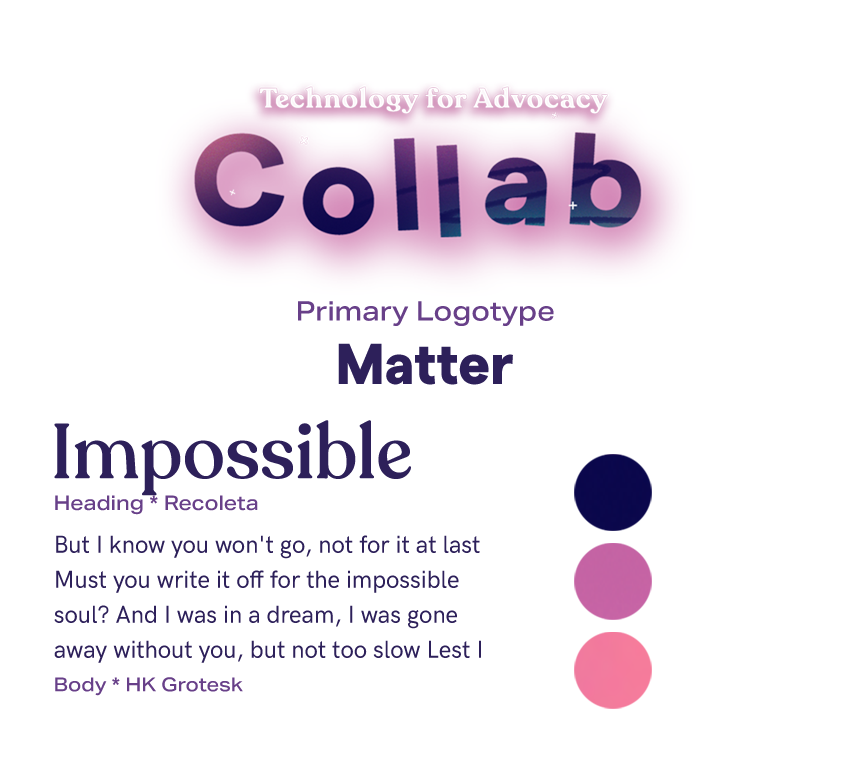
<style>
.page{position:relative;width:850px;height:768px;background:#ffffff}
.page>*{position:absolute;margin:0}
.t1{font:27.1px "AktivGroteskEx-Medium";color:#684089;scale:0.96 1}
.t2{font:57.5px "MatterTRIAL-Heavy";color:#2d205a;scale:0.96 1}
.t3{font:77.1px "Recoleta-Medium";color:#2d205a;scale:0.96 1}
.t4{font:20.2px "AktivGroteskEx-Medium";color:#684089;scale:0.96 1}
.t5{font:24.8px/35px "HKGrotesk-Medium";color:#2d205a;scale:0.96 1}
.t6{font:19.2px "AktivGroteskEx-Medium";color:#684089;scale:0.96 1}
</style>
<div class="page">
<p class="t1" style="left:298px;top:301px;width:256px;height:25px">Primary Logotype</p>
<p class="t2" style="left:338px;top:343px;width:175px;height:42px">Matter</p>
<p class="t3" style="left:54px;top:420px;width:357px;height:76px">Impossible</p>
<p class="t4" style="left:55px;top:495px;width:203px;height:20px">Heading * Recoleta</p>
<p class="t5" style="left:54px;top:535px;width:427px;height:128px">But I know you won't go, not for it at last Must you write it off for the impossible soul? And I was in a dream, I was gone away without you, but not too slow Lest I put it off, for I put it right for the impossible soul</p>
<p class="t6" style="left:55px;top:677px;width:188px;height:19px">Body * HK Grotesk</p>
</div>
